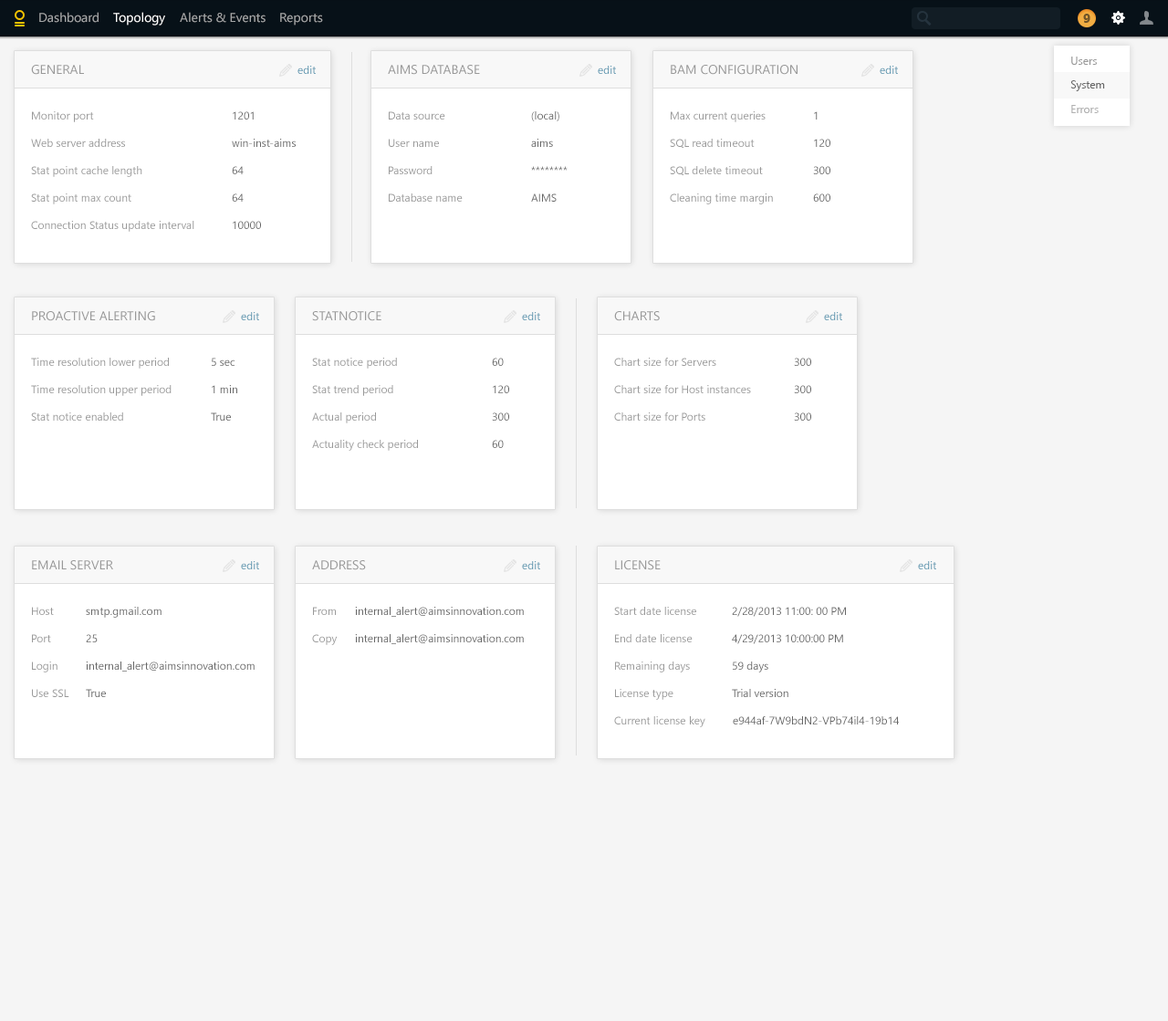
<style>
.page{position:relative;width:1168px;height:1021px;background:#f5f5f5}
.page>*{position:absolute;margin:0}
.t1{font:12.8px "SegoeUI";color:#a4a6a7}
.t2{font:12.8px "SegoeUI";color:#fefefe}
.t3{font:12.8px "SegoeUI-Bold";color:#705327}
.t4{font:12.8px "SegoeUI";color:#999999;text-transform:uppercase}
.t5{font:10.9px "SegoeUI";color:#5693ae}
.t6{font:10.9px "SegoeUI";color:#999999}
.t7{font:10.9px "SegoeUI";color:#666666}
.t8{font:10.9px "SegoeUI"}
</style>
<div class="page">
<p class="t1" style="left:39px;top:12px;width:60px;height:11px">Dashboard</p>
<p class="t2" style="left:113px;top:12px;width:52px;height:14px">Topology</p>
<p class="t1" style="left:180px;top:12px;width:86px;height:11px">Alerts &amp; Events</p>
<p class="t1" style="left:280px;top:13px;width:43px;height:13px">Reports</p>
<p class="t3" style="left:1083px;top:14px;width:7px;height:9px">9</p>
<p class="t4" style="left:31px;top:65px;width:53px;height:10px">General</p>
<p class="t5" style="left:297px;top:66px;width:19px;height:8px">edit</p>
<p class="t4" style="left:388px;top:65px;width:92px;height:10px">AIms database</p>
<p class="t5" style="left:598px;top:66px;width:18px;height:8px">edit</p>
<p class="t4" style="left:671px;top:65px;width:126px;height:10px">bam configuration</p>
<p class="t5" style="left:880px;top:66px;width:18px;height:8px">edit</p>
<p class="t6" style="left:1071px;top:57px;width:26px;height:8px">Users</p>
<p class="t7" style="left:1070px;top:80px;width:35px;height:11px">System</p>
<p class="t6" style="left:32px;top:111px;width:62px;height:11px">Monitor port</p>
<p class="t7" style="left:233px;top:111px;width:21px;height:9px">1201</p>
<p class="t6" style="left:389px;top:111px;width:56px;height:9px">Data source</p>
<p class="t7" style="left:531px;top:111px;width:28px;height:10px">(local)</p>
<p class="t6" style="left:671px;top:111px;width:95px;height:11px">Max current queries</p>
<p class="t7" style="left:814px;top:111px;width:4px;height:9px">1</p>
<p class="t6" style="left:1071px;top:105px;width:28px;height:8px;opacity:0.8">Errors</p>
<p class="t6" style="left:31px;top:139px;width:94px;height:8px">Web server address</p>
<p class="t7" style="left:232px;top:139px;width:64px;height:8px">win-inst-aims</p>
<p class="t6" style="left:389px;top:139px;width:50px;height:8px">User name</p>
<p class="t7" style="left:531px;top:139px;width:22px;height:8px">aims</p>
<p class="t6" style="left:670px;top:139px;width:85px;height:9px">SQL read timeout</p>
<p class="t7" style="left:814px;top:139px;width:16px;height:8px">120</p>
<p class="t6" style="left:31px;top:166px;width:111px;height:11px">Stat point cache length</p>
<p class="t7" style="left:232px;top:166px;width:12px;height:8px">64</p>
<p class="t6" style="left:389px;top:166px;width:43px;height:8px">Password</p>
<p class="t7" style="left:531px;top:166px;width:37px;height:5px">********</p>
<p class="t6" style="left:670px;top:166px;width:93px;height:9px">SQL delete timeout</p>
<p class="t7" style="left:813px;top:166px;width:17px;height:8px">300</p>
<p class="t6" style="left:31px;top:193px;width:100px;height:11px">Stat point max count</p>
<p class="t7" style="left:232px;top:193px;width:12px;height:9px">64</p>
<p class="t6" style="left:389px;top:193px;width:74px;height:9px">Database name</p>
<p class="t7" style="left:531px;top:193px;width:26px;height:9px">AIMS</p>
<p class="t6" style="left:670px;top:193px;width:103px;height:11px">Cleaning time margin</p>
<p class="t7" style="left:813px;top:193px;width:17px;height:9px">600</p>
<p class="t6" style="left:31px;top:221px;width:163px;height:11px">Connection Status update interval</p>
<p class="t7" style="left:233px;top:221px;width:28px;height:8px">10000</p>
<p class="t4" style="left:32px;top:311px;width:123px;height:10px">Proactive alerting</p>
<p class="t5" style="left:241px;top:312px;width:18px;height:8px">edit</p>
<p class="t4" style="left:312px;top:311px;width:69px;height:10px">Statnotice</p>
<p class="t5" style="left:522px;top:312px;width:18px;height:8px">edit</p>
<p class="t4" style="left:614px;top:311px;width:46px;height:10px">charts</p>
<p class="t5" style="left:824px;top:312px;width:18px;height:8px">edit</p>
<p class="t6" style="left:31px;top:358px;width:138px;height:11px">Time resolution lower period</p>
<p class="t8" style="left:212px;top:358px;width:22px;height:8px">5 sec</p>
<p class="t6" style="left:312px;top:358px;width:85px;height:11px">Stat notice period</p>
<p class="t7" style="left:492px;top:358px;width:12px;height:8px">60</p>
<p class="t6" style="left:614px;top:358px;width:102px;height:8px">Chart size for Servers</p>
<p class="t7" style="left:794px;top:358px;width:17px;height:8px">300</p>
<p class="t6" style="left:31px;top:385px;width:141px;height:11px">Time resolution upper period</p>
<p class="t7" style="left:212px;top:385px;width:25px;height:8px">1 min</p>
<p class="t6" style="left:312px;top:385px;width:81px;height:11px">Stat trend period</p>
<p class="t7" style="left:493px;top:385px;width:16px;height:8px">120</p>
<p class="t6" style="left:614px;top:385px;width:137px;height:8px">Chart size for Host instances</p>
<p class="t7" style="left:794px;top:385px;width:17px;height:8px">300</p>
<p class="t6" style="left:31px;top:412px;width:92px;height:9px">Stat notice enabled</p>
<p class="t7" style="left:211px;top:412px;width:20px;height:9px">True</p>
<p class="t6" style="left:312px;top:412px;width:64px;height:11px">Actual period</p>
<p class="t7" style="left:492px;top:412px;width:17px;height:9px">300</p>
<p class="t6" style="left:614px;top:412px;width:91px;height:9px">Chart size for Ports</p>
<p class="t7" style="left:794px;top:412px;width:17px;height:9px">300</p>
<p class="t6" style="left:312px;top:440px;width:106px;height:11px">Actuality check period</p>
<p class="t7" style="left:492px;top:440px;width:12px;height:8px">60</p>
<p class="t4" style="left:32px;top:560px;width:81px;height:10px">email server</p>
<p class="t5" style="left:241px;top:561px;width:18px;height:8px">edit</p>
<p class="t4" style="left:312px;top:560px;width:54px;height:10px">address</p>
<p class="t5" style="left:522px;top:561px;width:18px;height:8px">edit</p>
<p class="t4" style="left:615px;top:560px;width:46px;height:10px">License</p>
<p class="t5" style="left:918px;top:561px;width:18px;height:8px">edit</p>
<p class="t6" style="left:32px;top:607px;width:22px;height:8px">Host</p>
<p class="t7" style="left:86px;top:607px;width:75px;height:11px">smtp.gmail.com</p>
<p class="t6" style="left:313px;top:607px;width:23px;height:8px">From</p>
<p class="t7" style="left:355px;top:607px;width:169px;height:10px">internal_alert@aimsinnovation.com</p>
<p class="t6" style="left:614px;top:607px;width:82px;height:8px">Start date license</p>
<p class="t7" style="left:732px;top:607px;width:114px;height:10px">2/28/2013 11:00: 00 PM</p>
<p class="t6" style="left:32px;top:634px;width:19px;height:8px">Port</p>
<p class="t8" style="left:86px;top:634px;width:12px;height:8px">25</p>
<p class="t6" style="left:312px;top:634px;width:26px;height:11px">Copy</p>
<p class="t7" style="left:355px;top:634px;width:169px;height:10px">internal_alert@aimsinnovation.com</p>
<p class="t6" style="left:615px;top:634px;width:78px;height:8px">End date license</p>
<p class="t7" style="left:732px;top:634px;width:111px;height:10px">4/29/2013 10:00:00 PM</p>
<p class="t6" style="left:32px;top:662px;width:25px;height:10px">Login</p>
<p class="t7" style="left:86px;top:662px;width:169px;height:10px">internal_alert@aimsinnovation.com</p>
<p class="t6" style="left:615px;top:662px;width:75px;height:10px">Remaining days</p>
<p class="t7" style="left:733px;top:662px;width:35px;height:10px">59 days</p>
<p class="t6" style="left:32px;top:689px;width:37px;height:8px">Use SSL</p>
<p class="t7" style="left:86px;top:689px;width:20px;height:8px">True</p>
<p class="t6" style="left:615px;top:689px;width:58px;height:11px">License type</p>
<p class="t7" style="left:732px;top:689px;width:56px;height:8px">Trial version</p>
<p class="t6" style="left:614px;top:716px;width:91px;height:11px">Current license key</p>
<p class="t7" style="left:733px;top:716px;width:166px;height:8px">e944af-7W9bdN2-VPb74il4-19b14</p>
</div>
